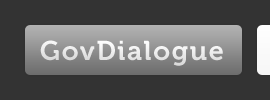
<style>
.page{position:relative;width:270px;height:100px;background:#333333}
.page>*{position:absolute;margin:0}
.t1{font:27px "Museo-700";letter-spacing:0.06em;color:#fefefe}
.t2{font:27px "Museo-700";letter-spacing:0.06em;color:#f6f6f6}
</style>
<div class="page">
<p class="t1" style="left:40px;top:40px;width:183px;height:26px"><span class="t2">Gov</span>Dialogue</p>
</div>
